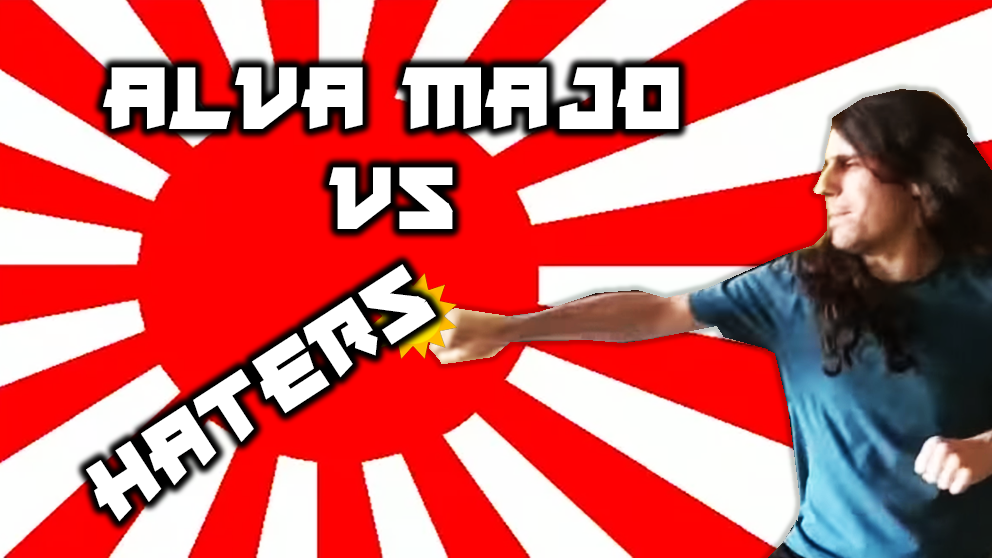
<style>
.page{position:relative;width:992px;height:558px}
.page>*{position:absolute;margin:0}
.t1{font:90px/100px "JapaneseRobot";color:#ffffff}
.t2{font:90px "JapaneseRobot";color:#ffffff}
</style>
<div class="page">
<p class="t1" style="left:103px;top:67px;width:576px;height:162px;text-align:center">Alva Majo<br>vs</p>
<p class="t2" style="left:86px;top:264px;width:350px;height:258px;rotate:-33deg">Haters</p>
</div>
